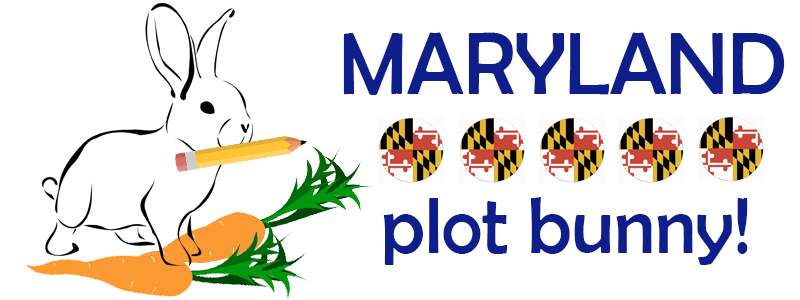
<style>
.page{position:relative;width:800px;height:300px;background:#ffffff}
.page>*{position:absolute;margin:0}
.t1{font:89.4px "BerlinSansFB-Reg";color:#0e1e8a;scale:0.96 1}
.t2{font:81.1px "BerlinSansFB-Reg";color:#0e1e8a;scale:0.96 1}
</style>
<div class="page">
<p class="t1" style="left:343px;top:32px;width:442px;height:63px">MARYLAND</p>
<p class="t2" style="left:383px;top:197px;width:365px;height:68px">plot bunny!</p>
</div>
